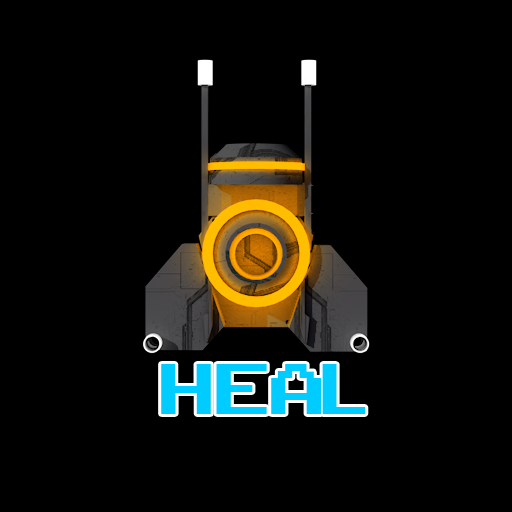
<style>
.page{position:relative;width:512px;height:512px;background:#000000}
.page>*{position:absolute;margin:0}
.t1{font:100px "ArcadeClassic";color:#00ccff}
</style>
<div class="page">
<p class="t1" style="left:161px;top:364px;width:205px;height:50px">Heal</p>
</div>
